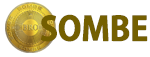
<style>
.page{position:relative;width:150px;height:57px;background:#ffffff}
.page>*{position:absolute;margin:0}
.t1{font:32.6px "AdobeGothicStd-Bold";letter-spacing:-0.025em;color:#745f01;font-weight:bold}
</style>
<div class="page">
<p class="t1" style="left:41px;top:14px;width:107px;height:28px">SOMBE</p>
</div>
